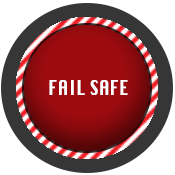
<style>
.page{position:relative;width:175px;height:175px;background:#ffffff}
.page>*{position:absolute;margin:0}
.t1{font:20px "Silom";letter-spacing:-0.02em;color:#ffffff;scale:0.83 1}
</style>
<div class="page">
<p class="t1" style="left:49px;top:80px;width:79px;height:15px">FAIL SAFE</p>
</div>
